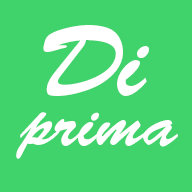
<style>
.page{position:relative;width:192px;height:192px;background:#41d36b}
.page>*{position:absolute;margin:0}
.t1{font:100px "BrushScriptStd";color:#ffffff}
.t2{font:66.7px "BrushScriptStd";color:#ffffff}
</style>
<div class="page">
<p class="t1" style="left:43px;top:25px;width:106px;height:71px">Di</p>
<p class="t2" style="left:16px;top:112px;width:162px;height:47px">prima</p>
</div>
